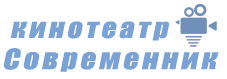
<style>
.page{position:relative;width:227px;height:79px;background:#ffffff}
.page>*{position:absolute;margin:0}
.t1{font:26px "Impact";letter-spacing:0.12em;color:#7ba2d5;font-style:italic;scale:1.15 1}
.t2{font:22px "Impact";letter-spacing:0.12em;color:#ffffff;font-style:italic;scale:1.2 1}
.t3{font:25px "Impact";letter-spacing:0.12em;color:#7ba2d5;font-style:italic;scale:1.15 1}
</style>
<div class="page">
<p class="t1" style="left:4px;top:21px;width:215px;height:51px"><span class="t2"> </span><span class="t3">кинотеатр<br></span>Современник</p>
</div>
